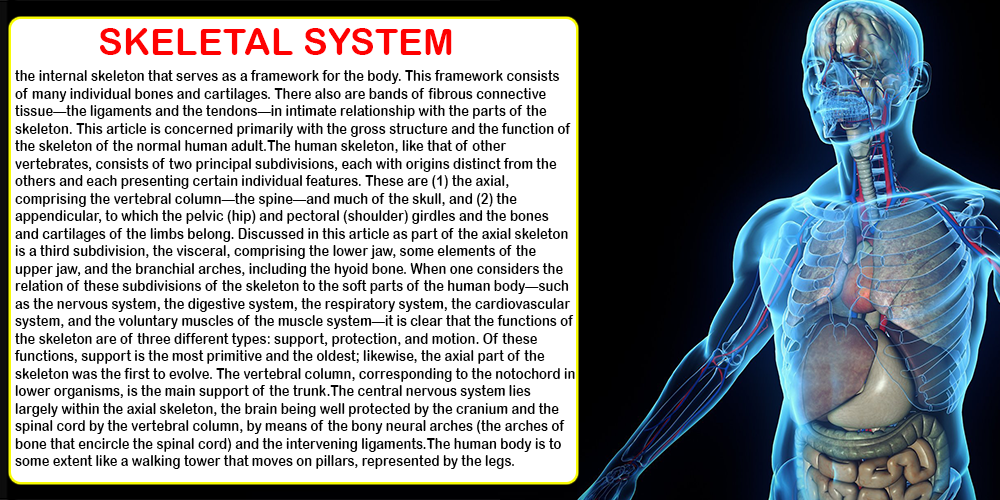
<style>
.page{position:relative;width:1000px;height:500px;background:#ffffff}
.page>*{position:absolute;margin:0}
.t1{font:37.4px "ArialRoundedMTBold";color:#fe0202}
.t2{font:14.6px "ArialRoundedMTBold";color:#030303;scale:0.9 1}
</style>
<div class="page">
<p class="t1" style="left:100px;top:28px;width:352px;height:27px">SKELETAL SYSTEM</p>
<p class="t2" style="left:14px;top:70px;width:561px;height:399px">the internal skeleton that serves as a framework for the body. This framework consists of many individual bones and cartilages. There also are bands of fibrous connective tissue—the ligaments and the tendons—in intimate relationship with the parts of the skeleton. This article is concerned primarily with the gross structure and the function of the skeleton of the normal human adult.The human skeleton, like that of other vertebrates, consists of two principal subdivisions, each with origins distinct from the others and each presenting certain individual features. These are (1) the axial, comprising the vertebral column—the spine—and much of the skull, and (2) the appendicular, to which the pelvic (hip) and pectoral (shoulder) girdles and the bones and cartilages of the limbs belong. Discussed in this article as part of the axial skeleton is a third subdivision, the visceral, comprising the lower jaw, some elements of the upper jaw, and the branchial arches, including the hyoid bone. When one considers the relation of these subdivisions of the skeleton to the soft parts of the human body—such as the nervous system, the digestive system, the respiratory system, the cardiovascular system, and the voluntary muscles of the muscle system—it is clear that the functions of the skeleton are of three different types: support, protection, and motion. Of these functions, support is the most primitive and the oldest; likewise, the axial part of the skeleton was the first to evolve. The vertebral column, corresponding to the notochord in lower organisms, is the main support of the trunk.The central nervous system lies largely within the axial skeleton, the brain being well protected by the cranium and the spinal cord by the vertebral column, by means of the bony neural arches (the arches of bone that encircle the spinal cord) and the intervening ligaments.The human body is to some extent like a walking tower that moves on pillars, represented by the legs.</p>
</div>
